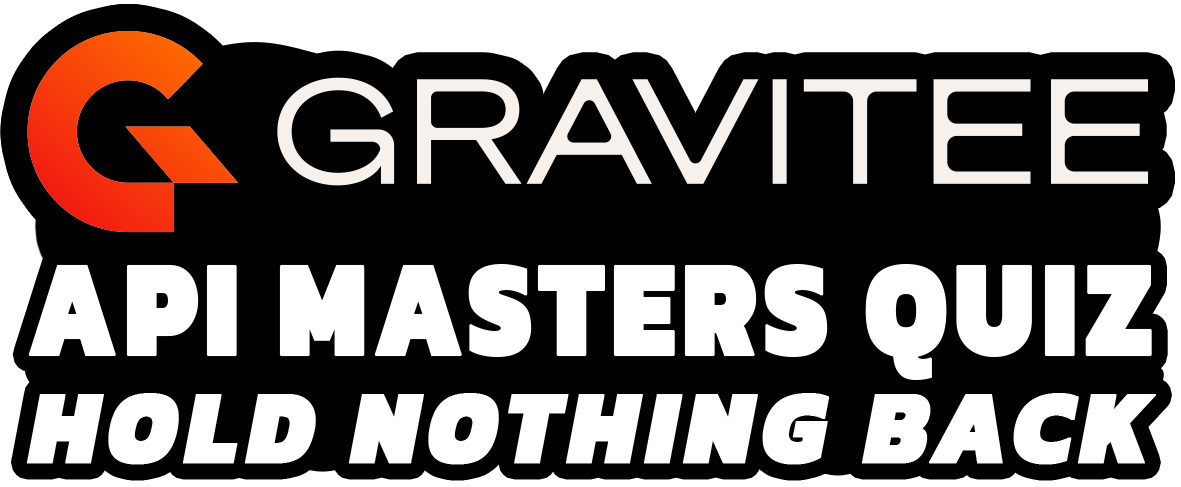
<style>
.page{position:relative;width:1181px;height:487px;background:#000000}
.page>*{position:absolute;margin:0}
.t1{font:138.8px "Kanit-Black";letter-spacing:0.04em;color:#ffffff;font-weight:bold;scale:0.82 1}
.t2{font:105.1px "Kanit-BlackItalic";letter-spacing:0.08em;color:#ffffff;font-weight:bold;scale:0.9 1}
</style>
<div class="page">
<p class="t1" style="left:28px;top:263px;width:1124px;height:118px">API MASTERS QUIZ</p>
<p class="t2" style="left:27px;top:393px;width:1129px;height:72px">HOLD NOTHING BACK</p>
</div>
